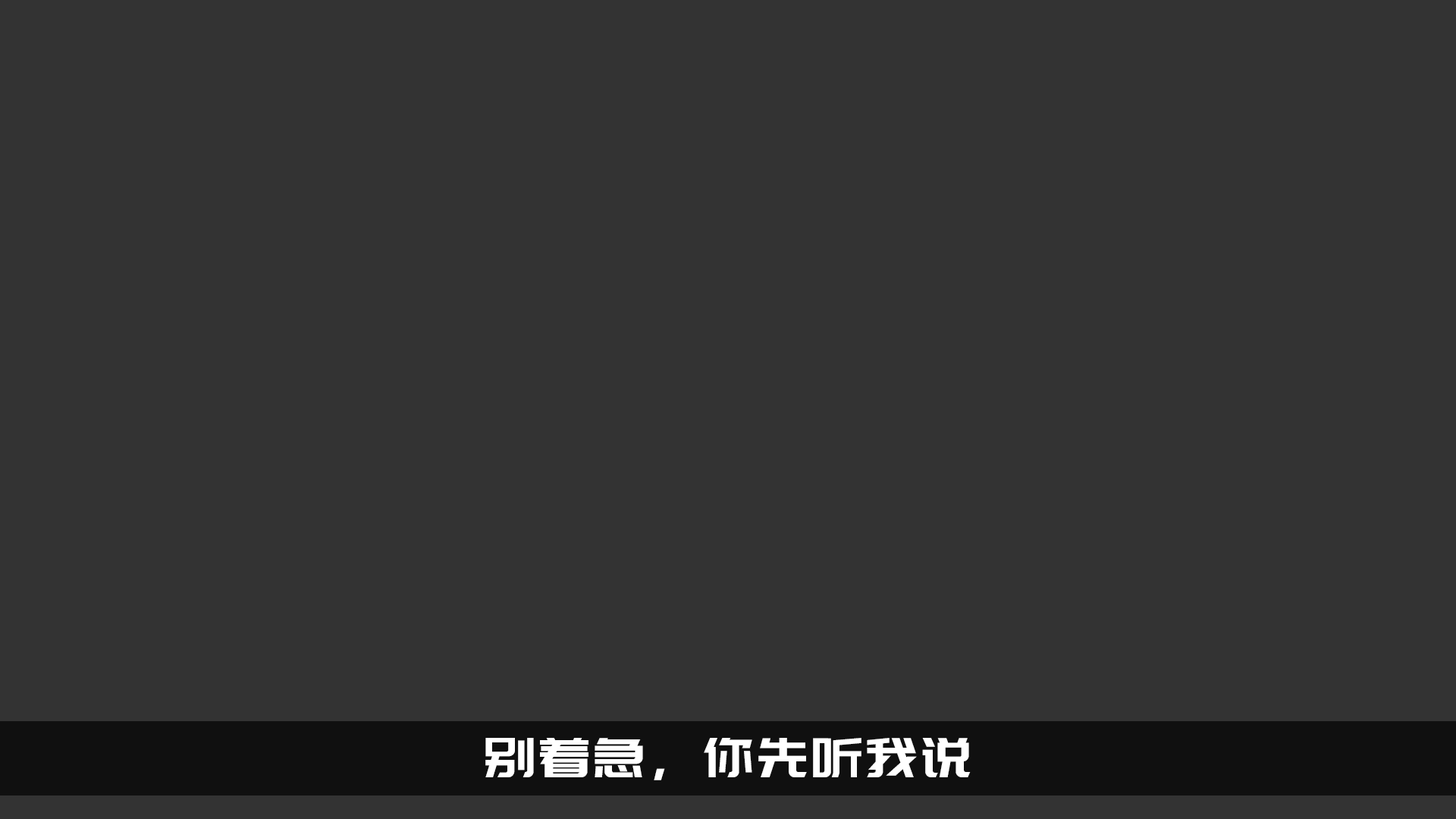
<style>
.page{position:relative;width:1456px;height:819px;background:#333333}
.page>*{position:absolute;margin:0}
.t1{font:54.6px "PangMenZhengDao-3";color:#ffffff}
</style>
<div class="page">
<p class="t1" style="left:485px;top:738px;width:486px;height:42px">别着急，你先听我说</p>
</div>
